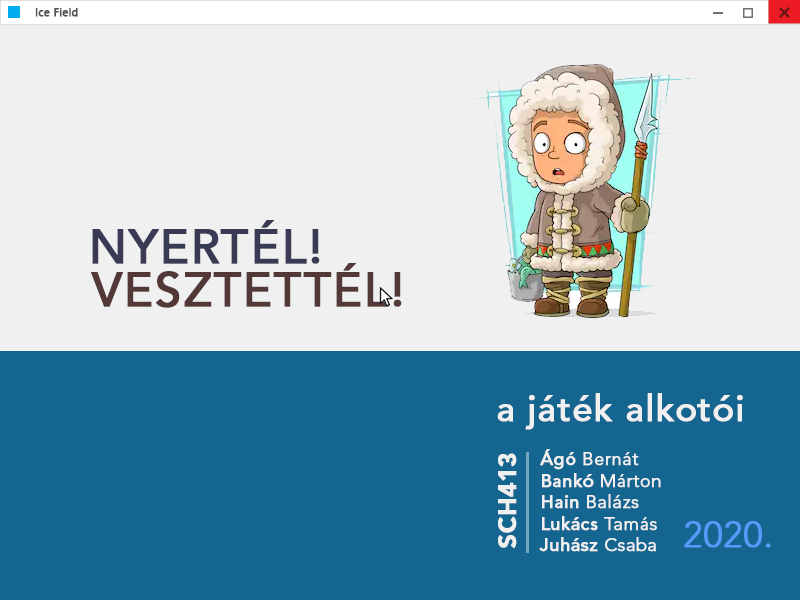
<style>
.page{position:relative;width:800px;height:600px;background:#f0f0f0}
.page>*{position:absolute;margin:0}
.t1{font:11px "SegoeUI";letter-spacing:0.01em;color:#515151;font-weight:bold}
.t2{font:48px "AvenirLTStd-Medium";letter-spacing:0.01em;color:#383b53;text-transform:uppercase;font-weight:bold}
.t3{font:48px "AvenirLTStd-Medium";letter-spacing:0.01em;color:#533838;text-transform:uppercase;font-weight:bold}
.t4{font:36px "AvenirLTStd-Medium";letter-spacing:0.01em;color:#f0f0f0;font-weight:bold}
.t5{font:18px "AvenirLTStd-Light";letter-spacing:0.01em;color:#f0f0f0;font-weight:bold}
.t6{font:18px "AvenirLTStd-Medium";letter-spacing:0.01em;color:#f0f0f0;font-weight:bold}
.t7{font:24px "AvenirLTStd-Black";letter-spacing:0.01em;color:#f0f0f0;font-weight:bold}
.t8{font:36px "AvenirLTStd-Light";letter-spacing:0.01em;color:#549bfa;font-weight:bold}
</style>
<div class="page">
<p class="t1" style="left:35px;top:8px;width:43px;height:9px">Ice Field</p>
<p class="t2" style="left:92px;top:220px;width:228px;height:44px">Nyertél!</p>
<p class="t3" style="left:91px;top:263px;width:311px;height:45px">Vesztettél!</p>
<p class="t4" style="left:497px;top:393px;width:246px;height:37px">a játék alkotói</p>
<p class="t5" style="left:539px;top:449px;width:122px;height:103px"><span class="t6">Ágó </span>Bernát<br><span class="t6">Bankó </span>Márton<br><span class="t6">Hain </span>Balázs<br><span class="t6">Lukács </span>Tamás<br><span class="t6">Juhász </span>Csaba</p>
<p class="t7" style="left:498px;top:453px;width:19px;height:96px;rotate:-90deg">SCH413</p>
<p class="t8" style="left:684px;top:521px;width:87px;height:27px">2020.</p>
</div>
